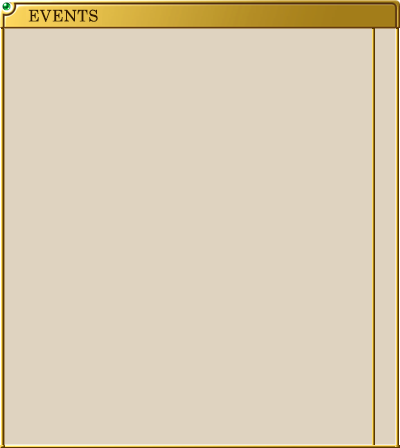
<style>
.page{position:relative;width:400px;height:448px;background:#dfd3c0}
.page>*{position:absolute;margin:0}
.t1{font:16px "CenturySchoolbook";letter-spacing:0.025em;color:#321a02}
</style>
<div class="page">
<p class="t1" style="left:28px;top:9px;width:70px;height:13px">EVENTS</p>
</div>
